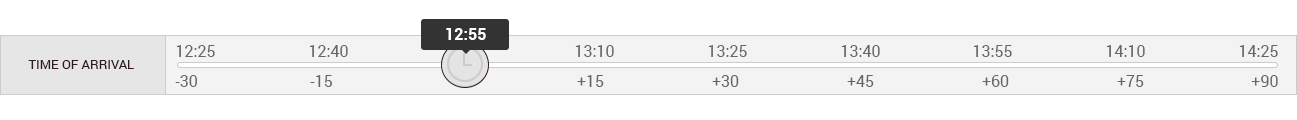
<style>
.page{position:relative;width:1297px;height:120px;background:#ffffff}
.page>*{position:absolute;margin:0}
.t1{font:16px "Roboto-Bold";color:#ffffff}
.t2{font:16px "Roboto-Regular";color:#666666}
.t3{font:13px "Roboto-Regular";color:#2f1b1f;text-transform:uppercase}
</style>
<div class="page">
<p class="t1" style="left:446px;top:28px;width:40px;height:12px">12:55</p>
<p class="t2" style="left:176px;top:45px;width:39px;height:12px">12:25</p>
<p class="t2" style="left:309px;top:45px;width:39px;height:12px">12:40</p>
<p class="t2" style="left:575px;top:45px;width:39px;height:12px">13:10</p>
<p class="t2" style="left:708px;top:45px;width:39px;height:12px">13:25</p>
<p class="t2" style="left:841px;top:45px;width:39px;height:12px">13:40</p>
<p class="t2" style="left:973px;top:45px;width:39px;height:12px">13:55</p>
<p class="t2" style="left:1106px;top:45px;width:39px;height:12px">14:10</p>
<p class="t2" style="left:1239px;top:45px;width:39px;height:12px">14:25</p>
<p class="t3" style="left:28px;top:60px;width:106px;height:9px">Time of Arrival</p>
<p class="t2" style="left:175px;top:75px;width:22px;height:12px">-30</p>
<p class="t2" style="left:310px;top:75px;width:22px;height:12px">-15</p>
<p class="t2" style="left:577px;top:75px;width:27px;height:12px">+15</p>
<p class="t2" style="left:712px;top:75px;width:27px;height:12px">+30</p>
<p class="t2" style="left:847px;top:75px;width:27px;height:12px">+45</p>
<p class="t2" style="left:982px;top:75px;width:27px;height:12px">+60</p>
<p class="t2" style="left:1117px;top:75px;width:27px;height:12px">+75</p>
<p class="t2" style="left:1251px;top:75px;width:27px;height:12px">+90</p>
</div>
